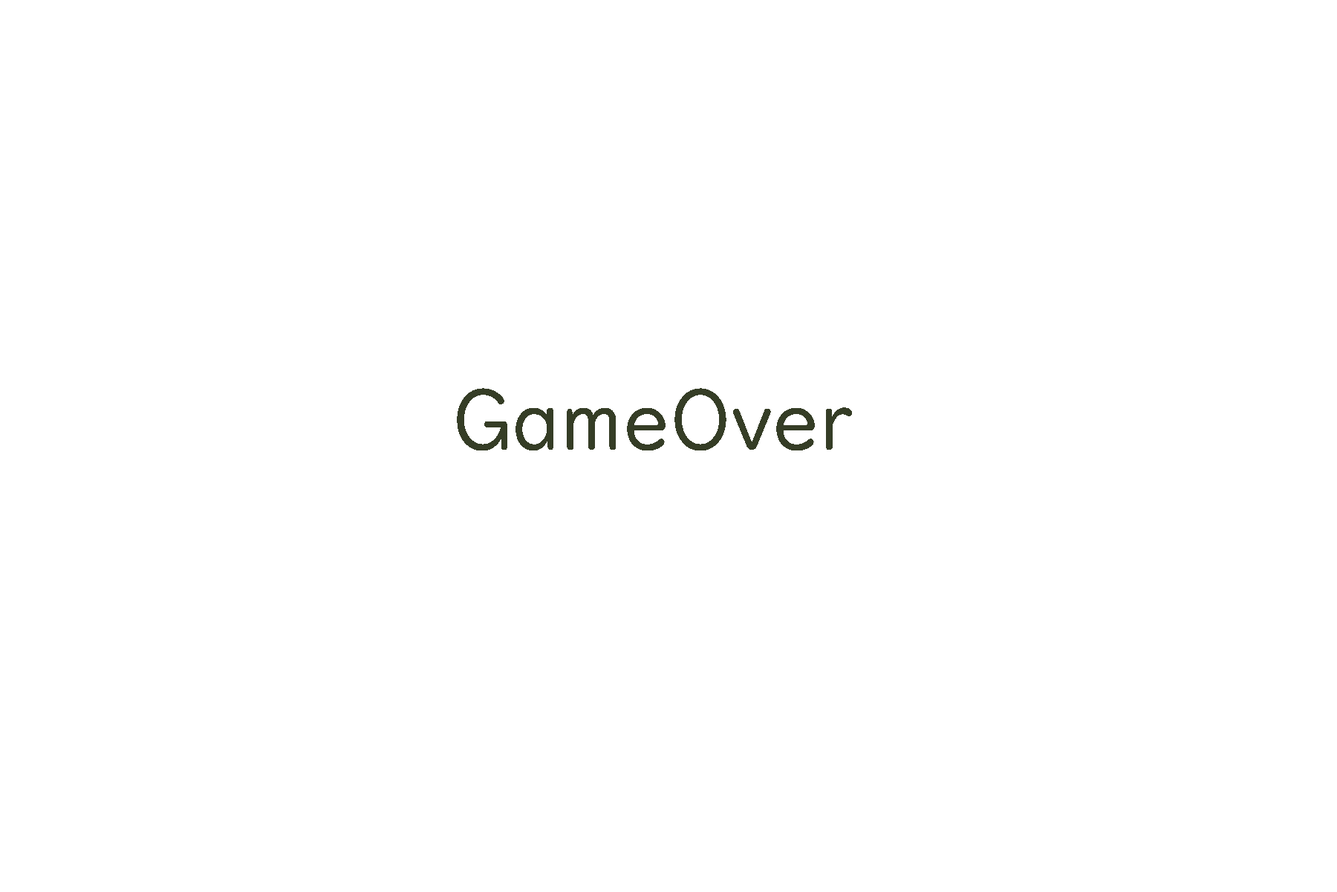
<style>
.page{position:relative;width:1337px;height:892px;background:#ffffff}
.page>*{position:absolute;margin:0}
.t1{font:85.2px "UDDigiKyokashoNK-R";color:#353d26;scale:0.93 1}
</style>
<div class="page">
<p class="t1" style="left:457px;top:388px;width:395px;height:62px">GameOver</p>
</div>
